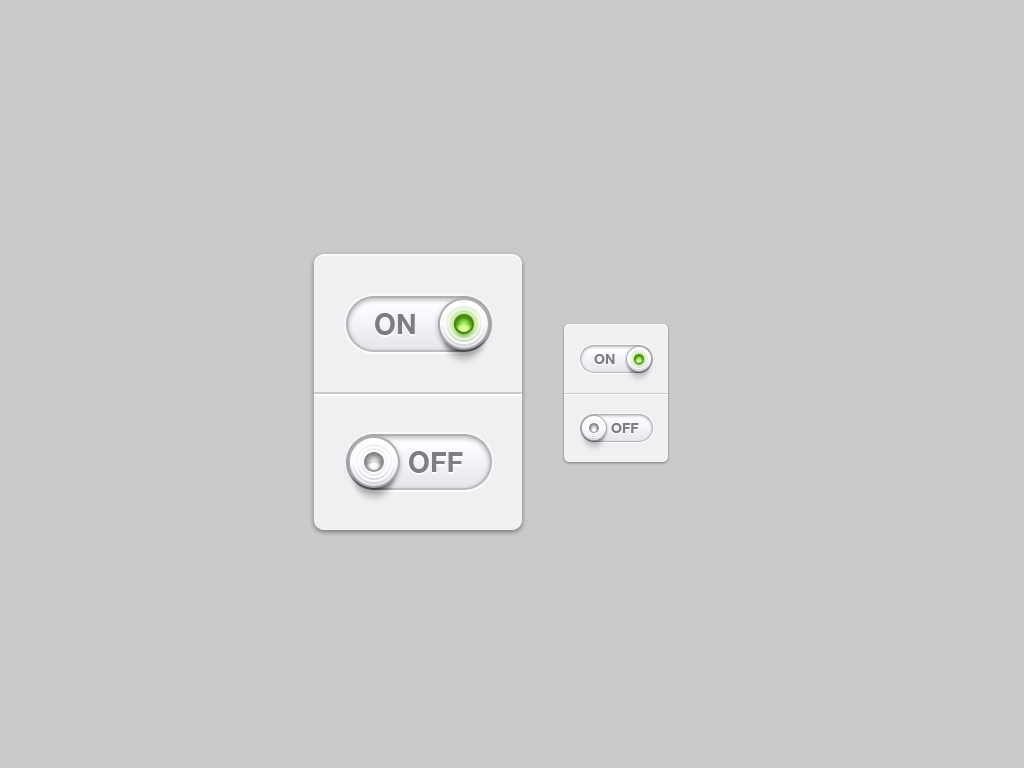
<style>
.page{position:relative;width:1024px;height:768px;background:#cacacc}
.page>*{position:absolute;margin:0}
.t1{font:28px "HelveticaNeue-Bold";color:#7e7d80}
.t2{font:14px "HelveticaNeue-Bold";color:#7e7d80}
</style>
<div class="page">
<p class="t1" style="left:375px;top:313px;width:40px;height:22px">ON</p>
<p class="t2" style="left:594px;top:354px;width:21px;height:10px">ON</p>
<p class="t2" style="left:611px;top:423px;width:28px;height:10px">OFF</p>
<p class="t1" style="left:409px;top:451px;width:54px;height:22px">OFF</p>
</div>
